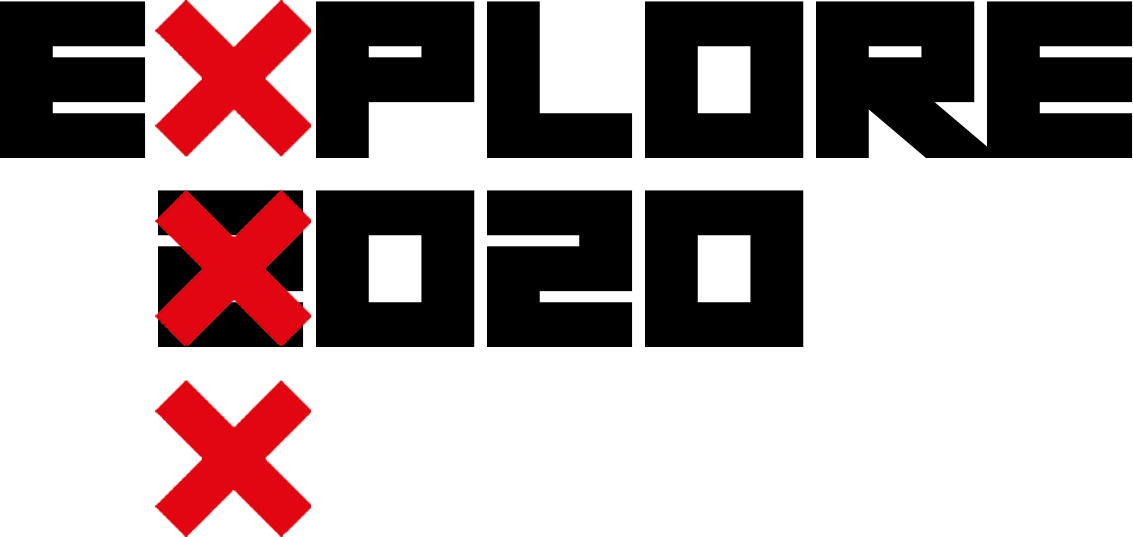
<style>
.page{position:relative;width:1133px;height:537px;background:#ffffff}
.page>*{position:absolute;margin:0}
.t1{font:229.5px "ShortXurkit";color:#000000;scale:1.17 1}
</style>
<div class="page">
<p class="t1" style="left:0px;top:1px;width:1133px;height:157px">e   plore</p>
<p class="t1" style="left:158px;top:190px;width:646px;height:157px">2020</p>
</div>
